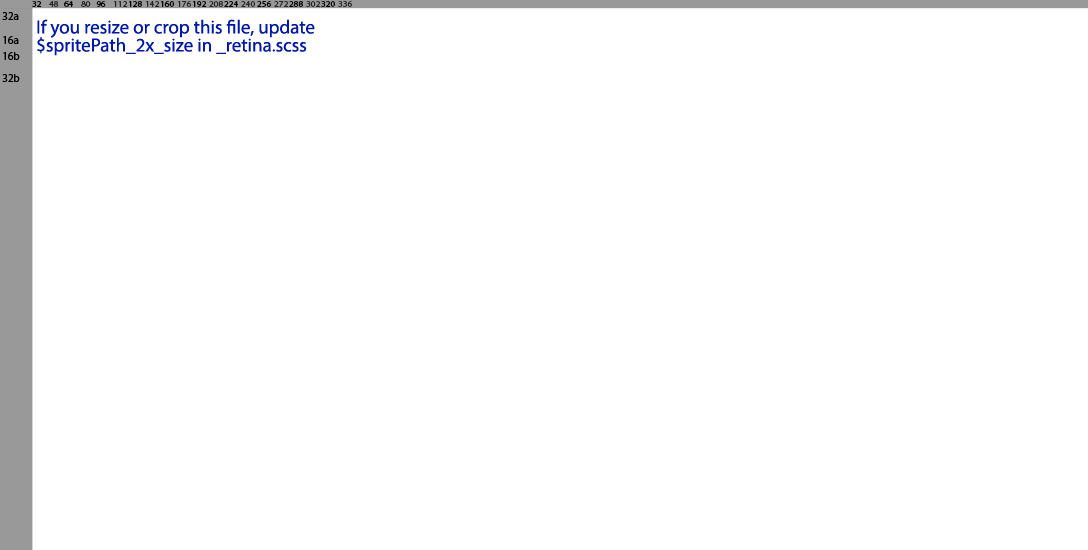
<style>
.page{position:relative;width:1088px;height:550px;background:#ffffff}
.page>*{position:absolute;margin:0}
.t1{font:9px "MyriadPro-Regular";color:#000000}
.t2{font:9px "MyriadPro-Regular";color:#262626}
.t3{font:9px "MyriadPro-Regular";color:#272727}
.t4{font:11px "MyriadPro-Regular";color:#000000}
.t5{font:19px/10px "MyriadPro-Regular";color:#0018a9}
</style>
<div class="page">
<p class="t1" style="left:32px;top:1px;width:10px;height:6px">32</p>
<p class="t2" style="left:49px;top:1px;width:10px;height:6px">48</p>
<p class="t1" style="left:64px;top:1px;width:9px;height:6px">64</p>
<p class="t3" style="left:81px;top:1px;width:10px;height:6px">80</p>
<p class="t1" style="left:96px;top:1px;width:10px;height:6px">96</p>
<p class="t3" style="left:113px;top:1px;width:15px;height:6px">112</p>
<p class="t1" style="left:128px;top:1px;width:14px;height:6px">128</p>
<p class="t3" style="left:145px;top:1px;width:15px;height:6px">142</p>
<p class="t1" style="left:160px;top:1px;width:14px;height:6px">160</p>
<p class="t3" style="left:177px;top:1px;width:14px;height:6px">176</p>
<p class="t1" style="left:192px;top:1px;width:15px;height:6px">192</p>
<p class="t3" style="left:209px;top:1px;width:14px;height:6px">208</p>
<p class="t1" style="left:224px;top:1px;width:14px;height:6px">224</p>
<p class="t3" style="left:241px;top:1px;width:14px;height:6px">240</p>
<p class="t1" style="left:257px;top:1px;width:14px;height:6px">256</p>
<p class="t3" style="left:274px;top:1px;width:15px;height:6px">272</p>
<p class="t1" style="left:289px;top:1px;width:14px;height:6px">288</p>
<p class="t3" style="left:306px;top:1px;width:15px;height:6px">302</p>
<p class="t1" style="left:321px;top:1px;width:14px;height:6px">320</p>
<p class="t3" style="left:338px;top:1px;width:14px;height:6px">336</p>
<p class="t4" style="left:2px;top:12px;width:17px;height:8px">32a</p>
<p class="t5" style="left:37px;top:19px;width:278px;height:37px">If you resize or crop this file, update <br>$spritePath_2x_size in _retina.scss</p>
<p class="t4" style="left:3px;top:36px;width:16px;height:8px">16a</p>
<p class="t4" style="left:3px;top:52px;width:17px;height:8px">16b</p>
<p class="t4" style="left:2px;top:74px;width:18px;height:8px">32b</p>
</div>
